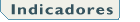
<style>
.page{position:relative;width:140px;height:22px;background:#f0f0e8}
.page>*{position:absolute;margin:0}
.t1{font:14.6px "GillSansMT-Bold";letter-spacing:0.06em;color:#35535e;scale:1.17 1}
</style>
<div class="page">
<p class="t1" style="left:11px;top:4px;width:102px;height:11px">Indicadores</p>
</div>
